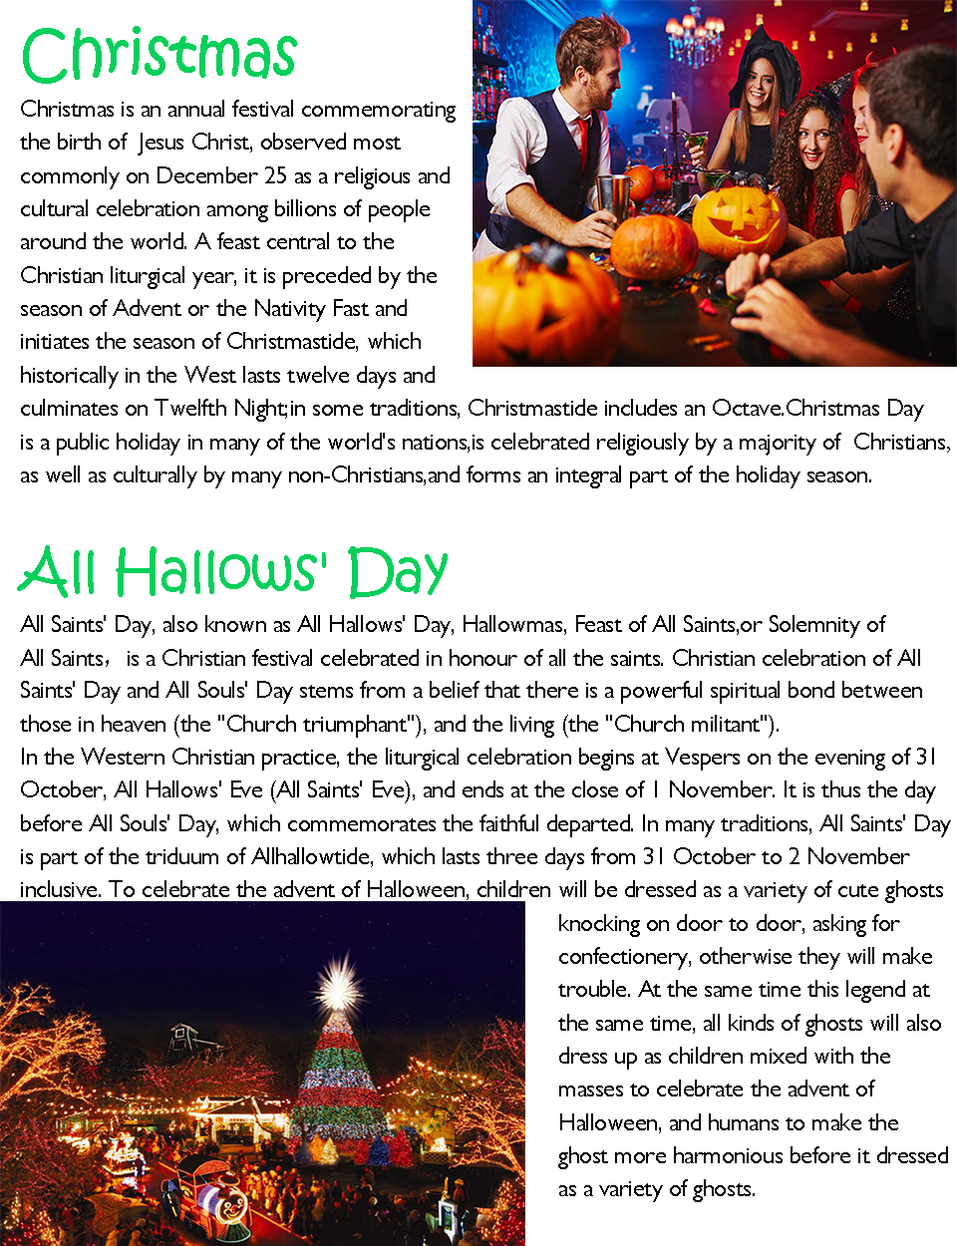
<style>
.page{position:relative;width:957px;height:1246px;background:#ffffff}
.page>*{position:absolute;margin:0}
.t1{font:23.6px/33.2px "GillSansMT";letter-spacing:-0.02em;color:#000000}
.t2{font:61.6px/83.1px "KristenITC-Regular";letter-spacing:-0.02em;color:#05d05b;scale:0.95 1}
.t3{font:23.6px/33.2px "SimSun";letter-spacing:-0.02em;color:#000000}
.t4{font:56px/83.1px "KristenITC-Regular";letter-spacing:-0.02em;color:#05d05b}
</style>
<div class="page">
<p class="t1" style="left:17px;top:26px;width:934px;height:1176px"><span class="t2">Christmas <br></span>Christmas is an annual festival commemorating <br>the birth of  Jesus Christ, observed most <br>commonly on December 25 as a religious and <br>cultural celebration among billions of people <br>around the world. A feast central to the <br>Christian liturgical year, it is preceded by the <br>season of Advent or the Nativity Fast and <br>initiates the season of Christmastide, which <br>historically in the West lasts twelve days and <br>culminates on Twelfth Night;in some traditions, Christmastide includes an Octave.Christmas Day<br>is a public holiday in many of the world's nations,is celebrated religiously by a majority of  Christians<span class="t3">,<br></span>as well as culturally by many non-Christians,and forms an integral part of the holiday season. <br><br><span class="t4">All Hallows' Day <br></span>All Saints' Day, also known as All Hallows' Day, Hallowmas, Feast of All Saints,or Solemnity of <br>All Saints<span class="t3">，</span>is a Christian festival celebrated in honour of all the saints. Christian celebration of All <br>Saints' Day and All Souls' Day stems from a belief that there is a powerful spiritual bond between <br>those in heaven (the "Church triumphant"), and the living (the "Church militant"). <br>In the Western Christian practice, the liturgical celebration begins at Vespers on the evening of 31 <br>October, All Hallows' Eve (All Saints' Eve), and ends at the close of 1 November. It is thus the day <br>before All Souls' Day, which commemorates the faithful departed. In many traditions, All Saints' Day <br>is part of the triduum of Allhallowtide, which lasts three days from 31 October to 2 November <br>inclusive. To celebrate the advent of Halloween, children will be dressed as a variety of cute ghosts <br>               knocking on door to door, asking for <br>               confectionery, otherwise they will make <br>               trouble. At the same time this legend at <br>               the same time, all kinds of ghosts will also <br>               dress up as children mixed with the <br>               masses to celebrate the advent of <br>               Halloween, and humans to make the <br>               ghost more harmonious before it dressed <br>               as a variety of ghosts.</p>
</div>
